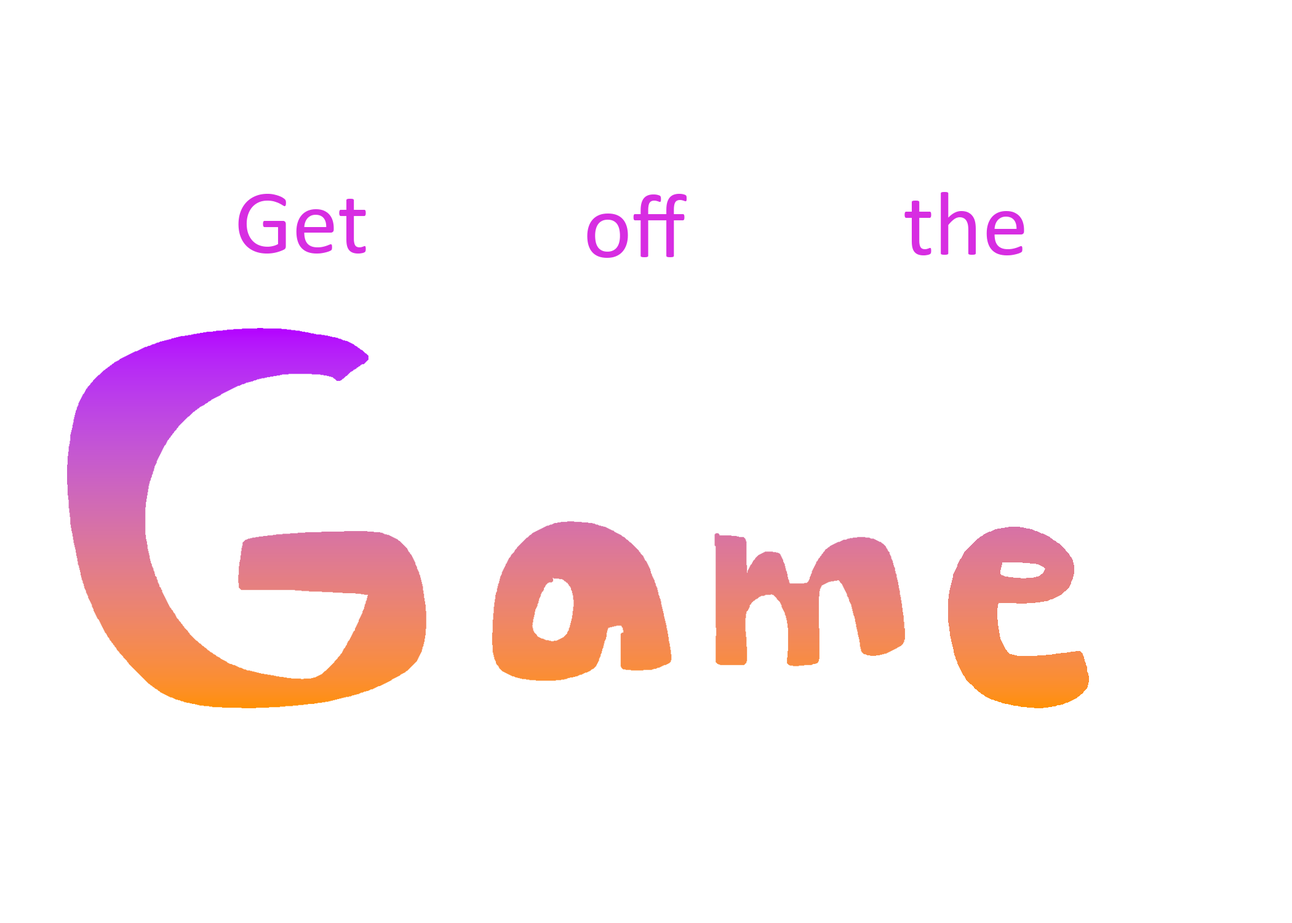
<style>
.page{position:relative;width:1292px;height:923px;background:#ffffff}
.page>*{position:absolute;margin:0}
.t1{font:92.3px "Calibri";color:#d72de2}
</style>
<div class="page">
<p class="t1" style="left:238px;top:194px;width:128px;height:59px">Get</p>
<p class="t1" style="left:587px;top:194px;width:100px;height:64px">off</p>
<p class="t1" style="left:904px;top:192px;width:120px;height:63px">the</p>
</div>
